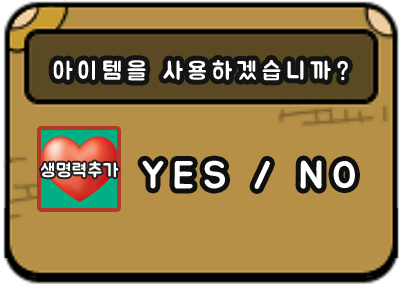
<style>
.page{position:relative;width:400px;height:288px;background:#b69047}
.page>*{position:absolute;margin:0}
.t1{font:24px "BMJUA";letter-spacing:0.22em;color:#ffffff}
.t2{font:18.2px "BMJUA";letter-spacing:0.06em;color:#ffffff}
.t3{font:38.8px "BMJUA";letter-spacing:0.22em;color:#ffffff}
</style>
<div class="page">
<p class="t1" style="left:53px;top:59px;width:295px;height:22px">아이템을 사용하겠습니까?</p>
<p class="t2" style="left:41px;top:161px;width:78px;height:17px">생명력추가</p>
<p class="t3" style="left:142px;top:160px;width:213px;height:29px">YES / NO</p>
</div>
